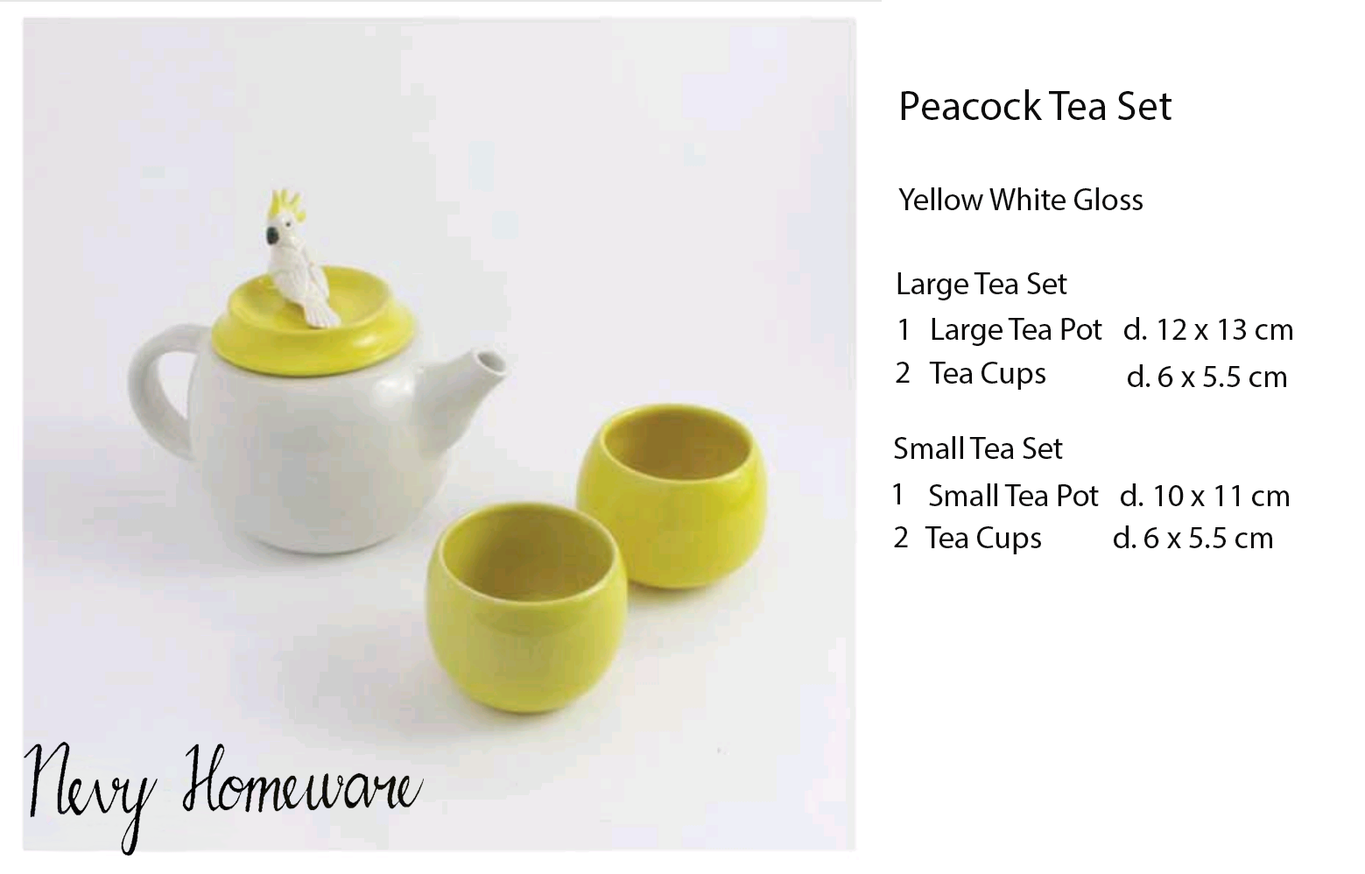
<style>
.page{position:relative;width:1365px;height:874px;background:#ffffff}
.page>*{position:absolute;margin:0}
.t1{font:42px "MyriadHebrew-Regular";color:#0d0c0c}
.t2{font:31.5px "MyriadHebrew-Regular";color:#0d0c0c}
</style>
<div class="page">
<p class="t1" style="left:901px;top:89px;width:270px;height:31px">Peacock Tea Set</p>
<p class="t2" style="left:898px;top:187px;width:244px;height:23px">Yellow White Gloss</p>
<p class="t2" style="left:897px;top:272px;width:170px;height:28px">Large Tea Set</p>
<p class="t2" style="left:931px;top:317px;width:361px;height:29px">Large Tea Pot   d. 12 x 13 cm</p>
<p class="t2" style="left:899px;top:319px;width:7px;height:21px">1</p>
<p class="t2" style="left:896px;top:362px;width:14px;height:21px">2</p>
<p class="t2" style="left:929px;top:362px;width:116px;height:28px">Tea Cups</p>
<p class="t2" style="left:1128px;top:364px;width:158px;height:23px">d. 6 x 5.5 cm</p>
<p class="t2" style="left:894px;top:436px;width:169px;height:23px">Small Tea Set</p>
<p class="t2" style="left:893px;top:483px;width:7px;height:21px">1</p>
<p class="t2" style="left:929px;top:483px;width:360px;height:23px">Small Tea Pot   d. 10 x 11 cm</p>
<p class="t2" style="left:894px;top:526px;width:14px;height:21px">2</p>
<p class="t2" style="left:924px;top:526px;width:117px;height:28px">Tea Cups</p>
<p class="t2" style="left:1114px;top:525px;width:158px;height:23px">d. 6 x 5.5 cm</p>
</div>
